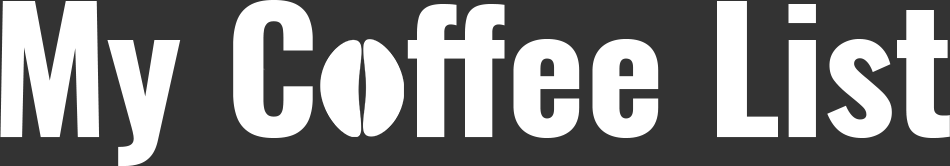
<style>
.page{position:relative;width:950px;height:166px;background:#333333}
.page>*{position:absolute;margin:0}
.t1{font:167.7px "Oswald-Bold";color:#ffffff}
</style>
<div class="page">
<p class="t1" style="left:0px;top:0px;width:950px;height:166px">My C  ffee List</p>
</div>
